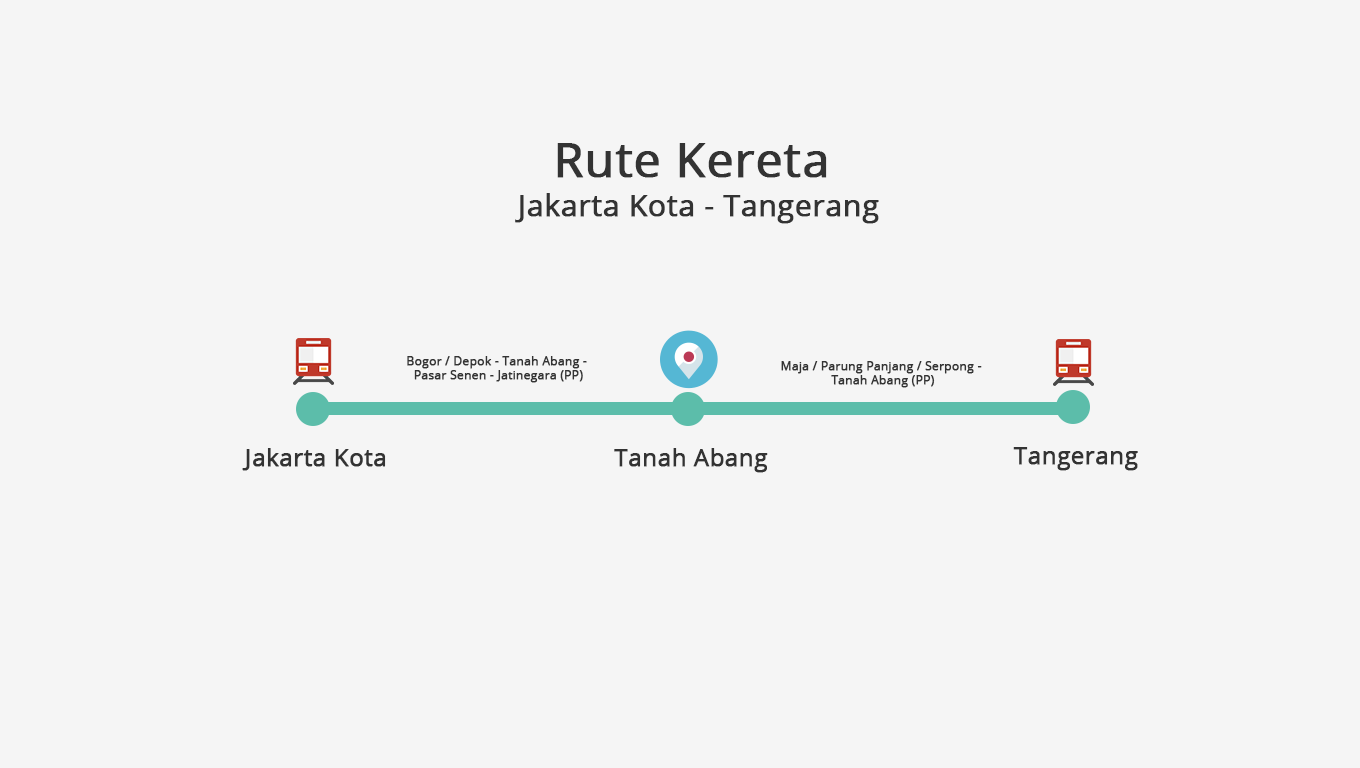
<style>
.page{position:relative;width:1360px;height:768px;background:#f5f5f5}
.page>*{position:absolute;margin:0}
.t1{font:30px/39px "OpenSans";color:#333333;font-weight:bold}
.t2{font:48px/39px "OpenSans";color:#333333;font-weight:bold}
.t3{font:12px "OpenSans";color:#333333;font-weight:bold}
.t4{font:24px "OpenSans";color:#333333;font-weight:bold}
</style>
<div class="page">
<p class="t1" style="left:515px;top:143px;width:364px;height:81px;text-align:center"><span class="t2">Rute Kereta <br></span>Jakarta Kota - Tangerang</p>
<p class="t3" style="left:407px;top:356px;width:180px;height:27px;text-align:center">Bogor / Depok - Tanah Abang - <br>Pasar Senen - Jatinegara (PP)</p>
<p class="t3" style="left:781px;top:361px;width:201px;height:27px;text-align:center">Maja / Parung Panjang / Serpong - <br>Tanah Abang (PP)</p>
<p class="t4" style="left:242px;top:448px;width:144px;height:23px">Jakarta Kota</p>
<p class="t4" style="left:614px;top:448px;width:154px;height:25px">Tanah Abang</p>
<p class="t4" style="left:1013px;top:447px;width:125px;height:24px">Tangerang</p>
</div>
